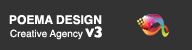
<style>
.page{position:relative;width:192px;height:50px;background:#333333}
.page>*{position:absolute;margin:0}
.t1{font:12px "Helvetica-Bold";color:#ffffff}
.t2{font:10px "Helvetica";color:#ffffff}
.t3{font:12px "GillSans-Bold";color:#ffffff}
.t4{font:16px "GillSans-Bold";color:#ffffff}
</style>
<div class="page">
<p class="t1" style="left:9px;top:15px;width:93px;height:10px">POEMA DESIGN</p>
<p class="t2" style="left:10px;top:29px;width:73px;height:11px">Creative Agency</p>
<p class="t3" style="left:85px;top:28px;width:10px;height:9px">V</p>
<p class="t4" style="left:94px;top:26px;width:8px;height:12px">3</p>
</div>
